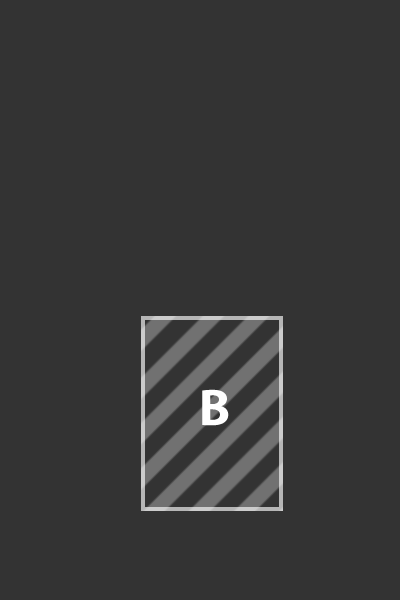
<style>
.page{position:relative;width:400px;height:600px;background:#333333}
.page>*{position:absolute;margin:0}
.t1{font:45px "AdobeGothicStd-Bold";letter-spacing:-0.05em;color:#ffffff;font-weight:bold;scale:1.11 1}
</style>
<div class="page">
<p class="t1" style="left:202px;top:389px;width:27px;height:37px">B</p>
</div>
